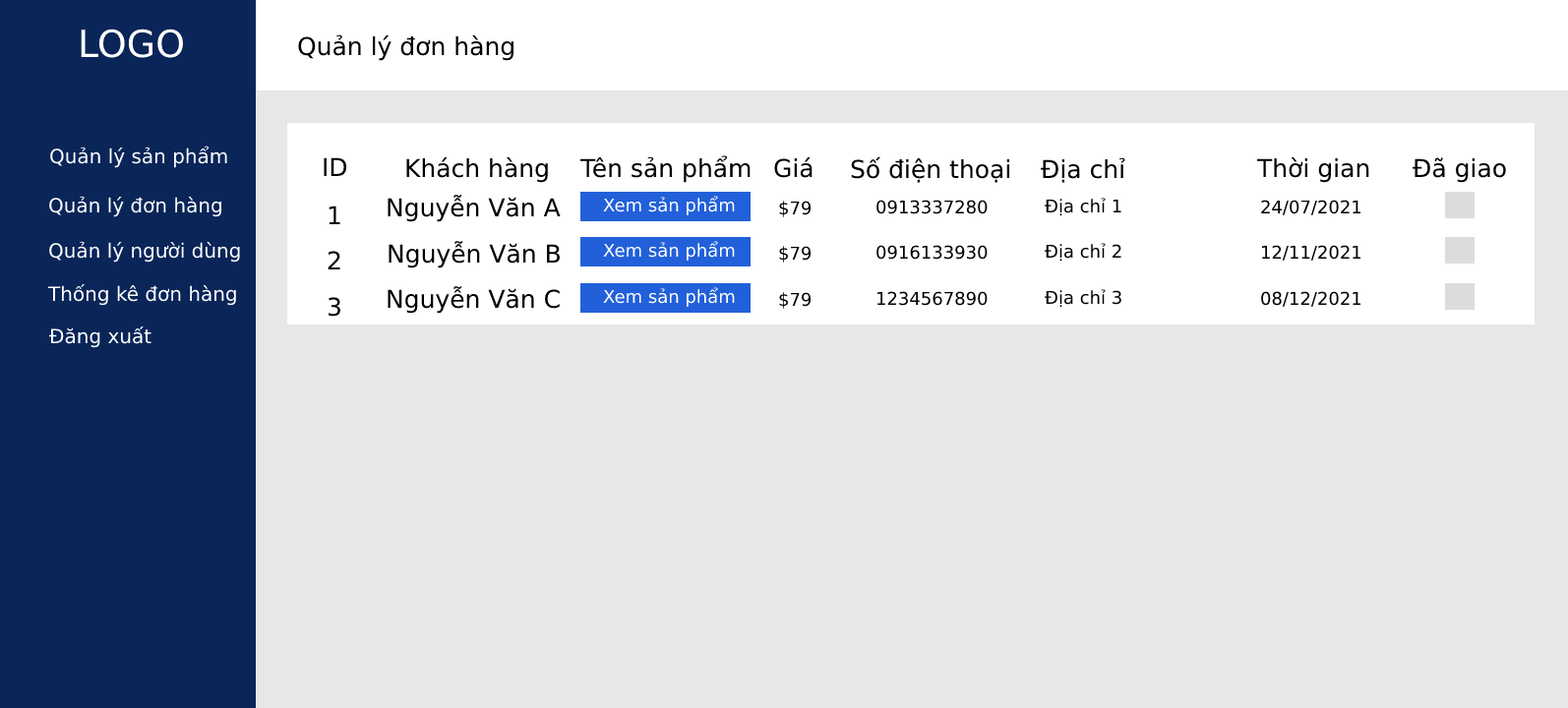
<style>
.page{position:relative;width:1568px;height:708px;background:#e7e7e7}
.page>*{position:absolute;margin:0}
.t1{font:37.4px "DejaVuSans";color:#ffffff}
.t2{font:24.6px "DejaVuSans";color:#000000}
.t3{font:19.7px "DejaVuSans";color:#ffffff}
.t4{font:17.7px "DejaVuSans";color:#ffffff}
.t5{font:17.7px "DejaVuSans";color:#000000}
</style>
<div class="page">
<p class="t1" style="left:81px;top:29px;width:102px;height:29px">LOGO</p>
<p class="t2" style="left:298px;top:34px;width:215px;height:27px">Quản lý đơn hàng</p>
<p class="t3" style="left:50px;top:146px;width:177px;height:22px">Quản lý sản phẩm</p>
<p class="t2" style="left:324px;top:157px;width:23px;height:19px">ID</p>
<p class="t2" style="left:406px;top:157px;width:142px;height:26px">Khách hàng</p>
<p class="t2" style="left:579px;top:155px;width:172px;height:28px">Tên sản phẩm</p>
<p class="t2" style="left:774px;top:157px;width:39px;height:21px">Giá</p>
<p class="t2" style="left:851px;top:156px;width:158px;height:27px">Số điện thoại</p>
<p class="t2" style="left:1041px;top:157px;width:84px;height:26px">Địa chỉ</p>
<p class="t2" style="left:1256px;top:157px;width:113px;height:26px">Thời gian</p>
<p class="t2" style="left:1413px;top:157px;width:93px;height:26px">Đã giao</p>
<p class="t3" style="left:49px;top:196px;width:172px;height:21px">Quản lý đơn hàng</p>
<p class="t2" style="left:388px;top:195px;width:173px;height:27px">Nguyễn Văn A</p>
<p class="t4" style="left:603px;top:196px;width:132px;height:19px">Xem sản phẩm</p>
<p class="t5" style="left:1045px;top:198px;width:76px;height:18px">Địa chỉ 1</p>
<p class="t2" style="left:329px;top:206px;width:11px;height:18px">1</p>
<p class="t5" style="left:779px;top:201px;width:33px;height:16px">$79</p>
<p class="t5" style="left:876px;top:200px;width:112px;height:14px">0913337280</p>
<p class="t5" style="left:1261px;top:200px;width:100px;height:15px">24/07/2021</p>
<p class="t3" style="left:49px;top:241px;width:191px;height:22px">Quản lý người dùng</p>
<p class="t2" style="left:389px;top:241px;width:171px;height:28px">Nguyễn Văn B</p>
<p class="t4" style="left:603px;top:241px;width:132px;height:20px">Xem sản phẩm</p>
<p class="t5" style="left:779px;top:246px;width:33px;height:17px">$79</p>
<p class="t5" style="left:876px;top:245px;width:112px;height:15px">0916133930</p>
<p class="t5" style="left:1045px;top:243px;width:76px;height:19px">Địa chỉ 2</p>
<p class="t5" style="left:1261px;top:245px;width:100px;height:16px">12/11/2021</p>
<p class="t2" style="left:328px;top:251px;width:12px;height:19px">2</p>
<p class="t3" style="left:47px;top:284px;width:189px;height:22px">Thống kê đơn hàng</p>
<p class="t2" style="left:388px;top:286px;width:172px;height:28px">Nguyễn Văn C</p>
<p class="t4" style="left:603px;top:287px;width:132px;height:20px">Xem sản phẩm</p>
<p class="t5" style="left:779px;top:292px;width:33px;height:17px">$79</p>
<p class="t5" style="left:876px;top:291px;width:112px;height:15px">1234567890</p>
<p class="t5" style="left:1045px;top:289px;width:76px;height:19px">Địa chỉ 3</p>
<p class="t5" style="left:1261px;top:291px;width:100px;height:16px">08/12/2021</p>
<p class="t2" style="left:328px;top:297px;width:12px;height:20px">3</p>
<p class="t3" style="left:49px;top:327px;width:102px;height:21px">Đăng xuất</p>
</div>
